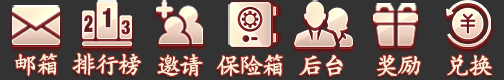
<style>
.page{position:relative;width:504px;height:80px;background:#333333}
.page>*{position:absolute;margin:0}
.t1{font:24.3px "AaBoruokaishuBldjf";letter-spacing:-0.06em;color:#fff4da}
</style>
<div class="page">
<p class="t1" style="left:15px;top:53px;width:42px;height:23px">邮箱</p>
<p class="t1" style="left:72px;top:53px;width:69px;height:23px">排行榜</p>
<p class="t1" style="left:157px;top:54px;width:46px;height:23px">邀请</p>
<p class="t1" style="left:217px;top:54px;width:66px;height:23px">保险箱</p>
<p class="t1" style="left:447px;top:54px;width:45px;height:22px">兑换</p>
<p class="t1" style="left:299px;top:55px;width:44px;height:22px">后台</p>
<p class="t1" style="left:377px;top:55px;width:44px;height:21px">奖励</p>
</div>
